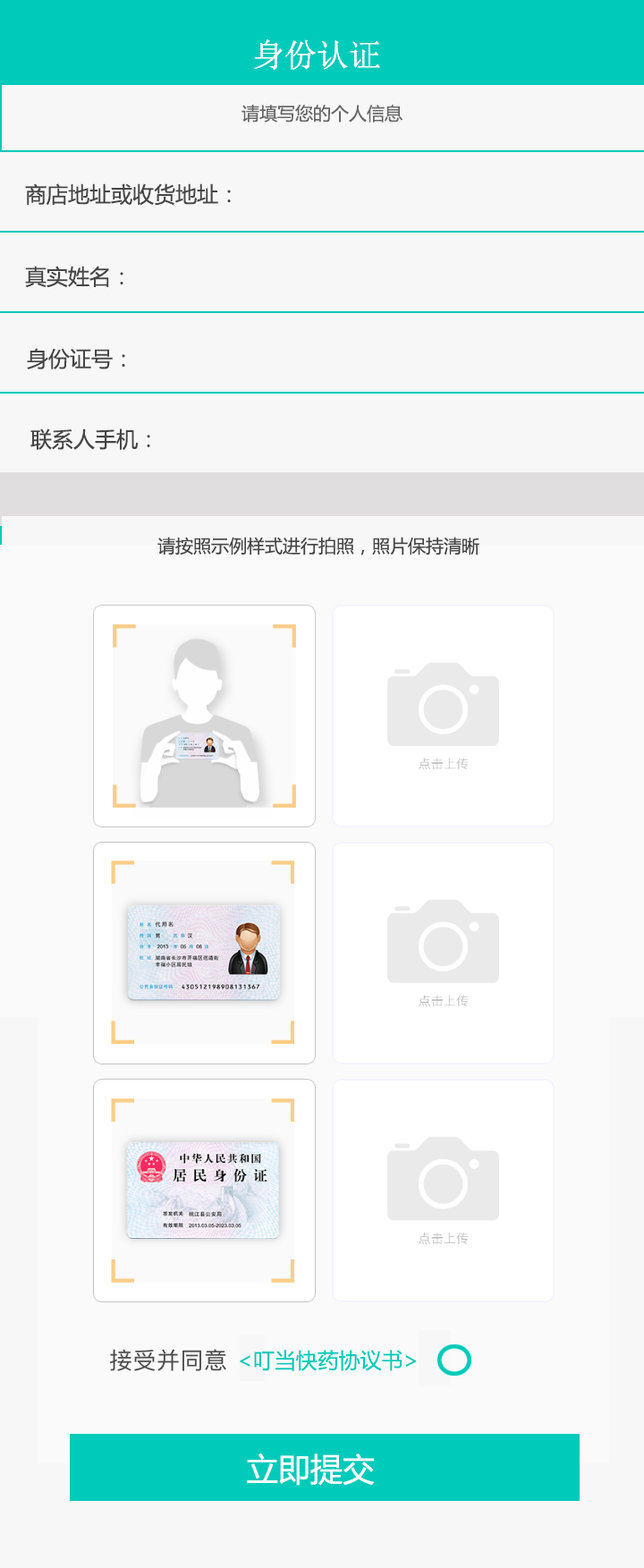
<style>
.page{position:relative;width:644px;height:1568px;background:#f7f7f7}
.page>*{position:absolute;margin:0}
.t1{font:32.2px "NSimSun";color:#fdfcfc}
.t2{font:17.9px "MicrosoftYaHei";color:#666666}
.t3{font:21.5px "MicrosoftYaHei";color:#454545}
.t4{font:17.9px "MicrosoftYaHei";color:#464646}
.t5{font:21.5px "MicrosoftYaHei";color:#00caba}
.t6{font:32.2px "MicrosoftYaHei";color:#fefefe}
</style>
<div class="page">
<p class="t1" style="left:254px;top:39px;width:126px;height:31px">身份认证</p>
<p class="t1" style="left:254px;top:39px;width:126px;height:31px">身份认证</p>
<p class="t2" style="left:242px;top:105px;width:161px;height:18px">请填写您的个人信息</p>
<p class="t3" style="left:25px;top:183px;width:206px;height:23px">商店地址或收货地址：</p>
<p class="t3" style="left:25px;top:266px;width:98px;height:22px">真实姓名：</p>
<p class="t3" style="left:27px;top:348px;width:98px;height:21px">身份证号：</p>
<p class="t3" style="left:30px;top:428px;width:120px;height:22px">联系人手机：</p>
<p class="t4" style="left:157px;top:537px;width:322px;height:18px">请按照示例样式进行拍照，照片保持清晰</p>
<p class="t5" style="left:240px;top:1350px;width:177px;height:21px">&lt;叮当快药协议书&gt;</p>
<p class="t6" style="left:247px;top:1453px;width:128px;height:33px">立即提交</p>
</div>
